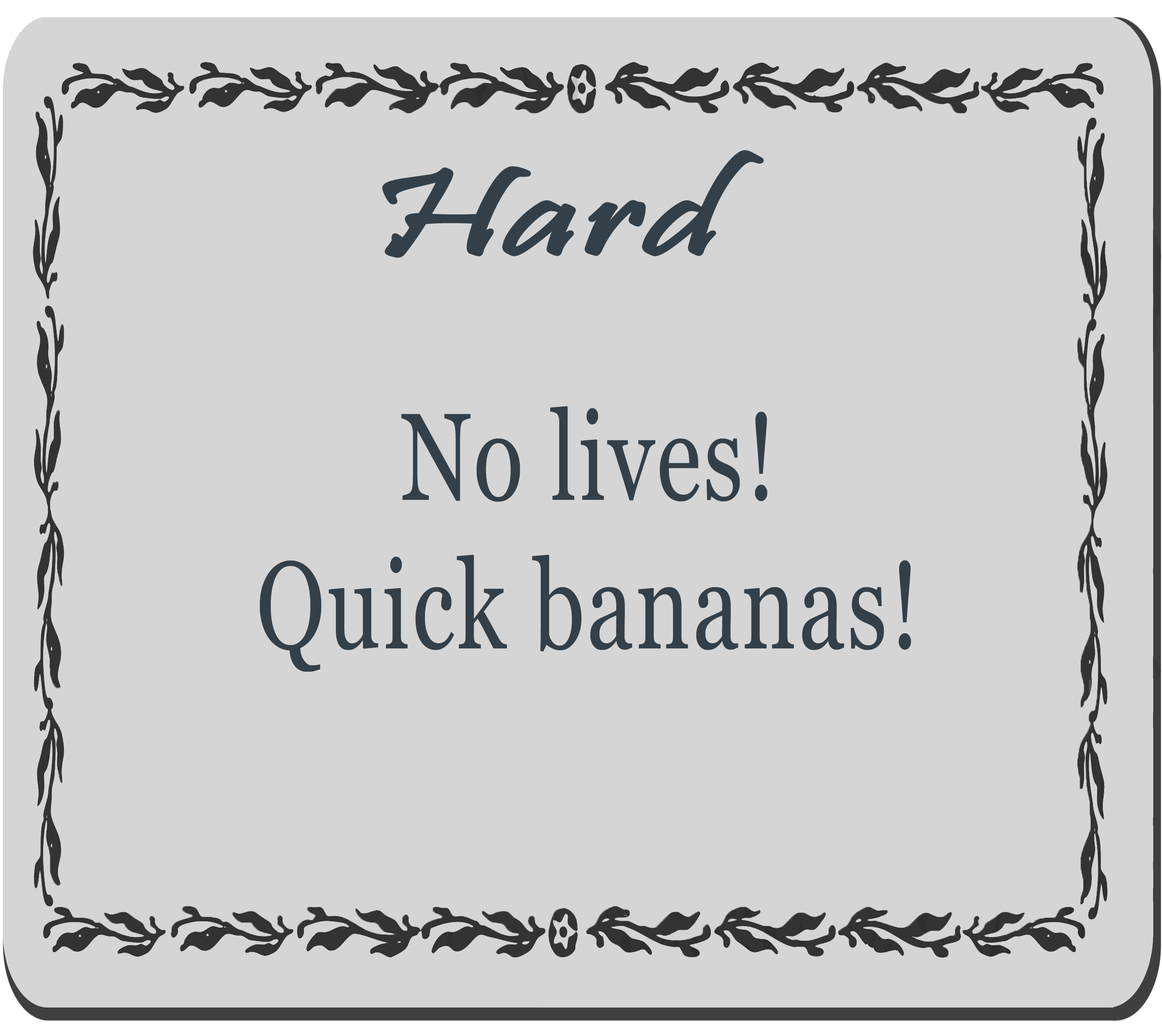
<style>
.page{position:relative;width:1162px;height:1026px;background:#d5d5d5}
.page>*{position:absolute;margin:0}
.t1{font:123.2px "Pristina-Regular";letter-spacing:0.025em;color:#344049;scale:1.5 1}
.t2{font:124px "Vani";letter-spacing:0.025em;color:#344049;scale:0.75 1}
</style>
<div class="page">
<p class="t1" style="left:384px;top:152px;width:378px;height:104px">Hard</p>
<p class="t2" style="left:259px;top:406px;width:652px;height:266px;text-align:center">No lives!<br>Quick bananas!</p>
</div>
